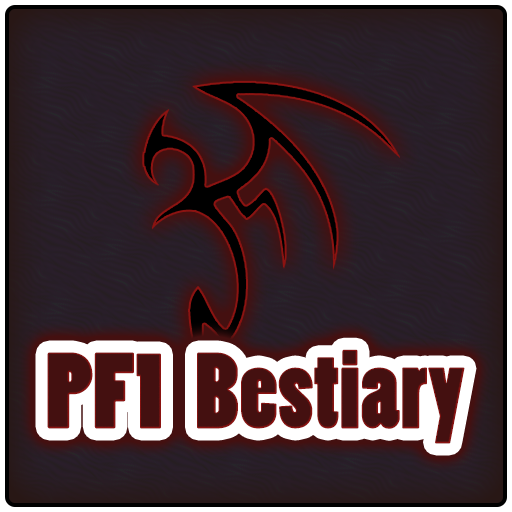
<style>
.page{position:relative;width:512px;height:512px}
.page>*{position:absolute;margin:0}
.t1{font:100px "PoplarStd";letter-spacing:-0.02em;color:#441010;font-weight:bold}
</style>
<div class="page">
<p class="t1" style="left:47px;top:349px;width:418px;height:95px">PF1   Bestiary</p>
</div>
